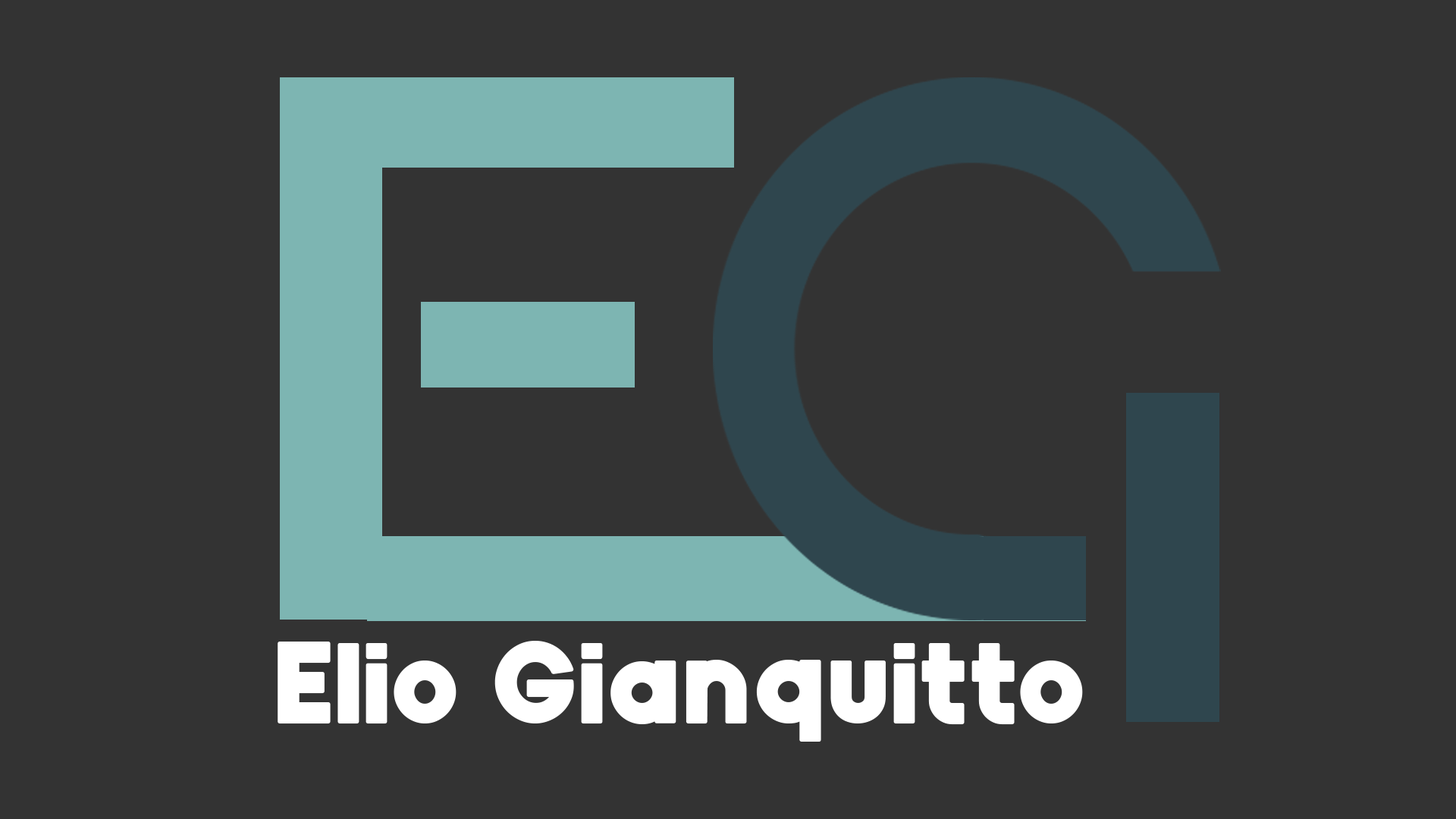
<style>
.page{position:relative;width:1456px;height:819px;background:#333333}
.page>*{position:absolute;margin:0}
.t1{font:110.1px "Gila-Bold";color:#ffffff}
</style>
<div class="page">
<p class="t1" style="left:278px;top:641px;width:805px;height:101px">Elio Gianquitto</p>
</div>
